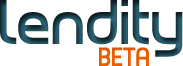
<style>
.page{position:relative;width:183px;height:66px;background:#ffffff}
.page>*{position:absolute;margin:0}
.t1{font:60px "PlanetEstyle"}
.t2{font:25px "PlanetEstyle";color:#ff6600}
</style>
<div class="page">
<p class="t1" style="left:0px;top:0px;width:183px;height:57px">lendity</p>
<p class="t2" style="left:99px;top:47px;width:50px;height:19px">BETA</p>
</div>
